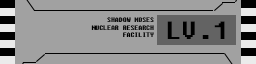
<style>
.page{position:relative;width:256px;height:64px;background:#a1a1a1}
.page>*{position:absolute;margin:0}
.t1{font:6.2px "Fixedsys";color:#000000}
.t2{font:25px "Fixedsys";color:#000000}
</style>
<div class="page">
<p class="t1" style="left:91px;top:17px;width:63px;height:20px;text-align:right">SHADOW MOSES<br>NUCLEAR RESEARCH FACILITY</p>
<p class="t2" style="left:167px;top:21px;width:58px;height:18px">LV.1</p>
</div>
